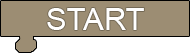
<style>
.page{position:relative;width:191px;height:53px;background:#9c8d73}
.page>*{position:absolute;margin:0}
.t1{font:30.4px "ArialMT";color:#ffffff}
</style>
<div class="page">
<p class="t1" style="left:47px;top:8px;width:97px;height:22px">START</p>
</div>
